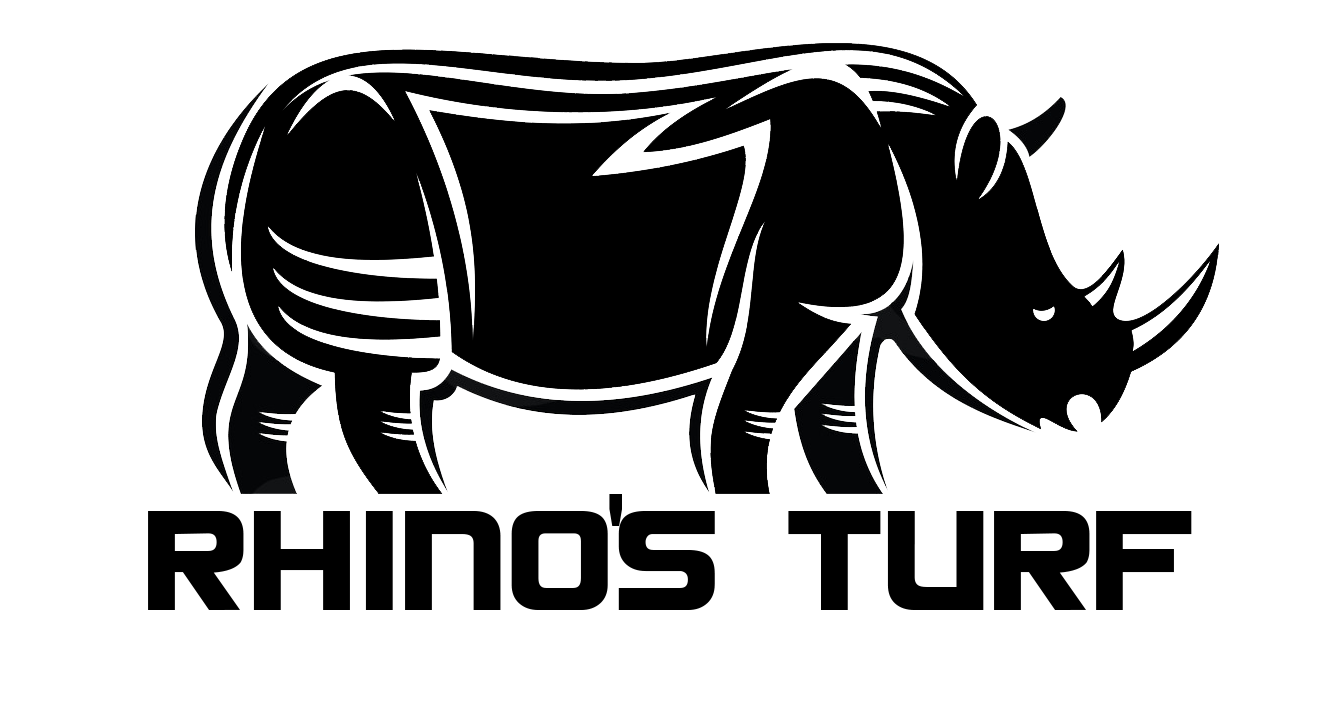
<style>
.page{position:relative;width:1326px;height:702px;background:#ffffff}
.page>*{position:absolute;margin:0}
.t1{font:125px "ArialMT";color:#000000}
.t2{font:124.3px "DieHundNormal";color:#000000}
</style>
<div class="page">
<p class="t1" style="left:609px;top:494px;width:13px;height:32px">'</p>
<p class="t2" style="left:148px;top:511px;width:1044px;height:99px">RHINOS TURF</p>
</div>
